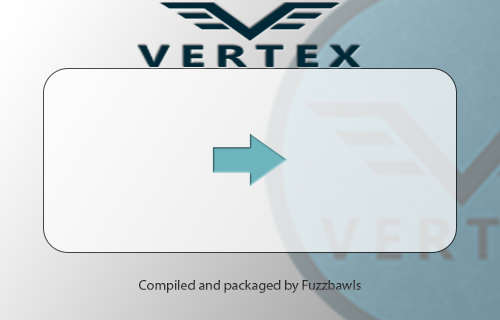
<style>
.page{position:relative;width:500px;height:320px}
.page>*{position:absolute;margin:0}
.t1{font:14px "MyriadPro-Regular"}
</style>
<div class="page">
<p class="t1" style="left:139px;top:280px;width:222px;height:13px">Compiled and packaged by Fuzzbawls</p>
</div>
